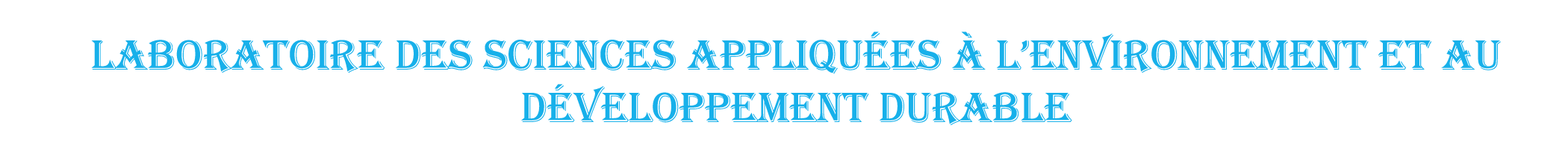
<style>
.page{position:relative;width:1568px;height:143px;background:#ffffff}
.page>*{position:absolute;margin:0}
.t1{font:43.6px "Algerian";color:#17b0ea}
</style>
<div class="page">
<p class="t1" style="left:91px;top:31px;width:1410px;height:94px;text-align:center">LABORATOIRE DES SCIENCES APPLIQUÉES À L’ENVIRONNEMENT ET AU DÉVELOPPEMENT DURABLE</p>
</div>
